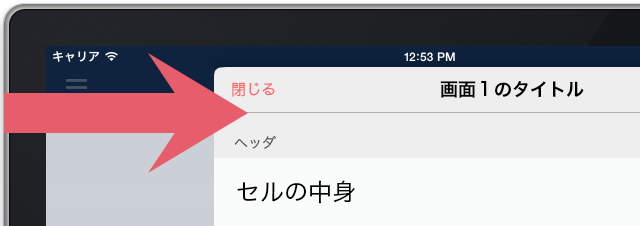
<style>
.page{position:relative;width:640px;height:226px;background:#eeeeee}
.page>*{position:absolute;margin:0}
.t1{font:15px "HiraKakuPro-W3";color:#f96969}
.t2{font:18px "HiraKakuPro-W6";color:#000000}
.t3{font:14px "HiraKakuPro-W3";color:#565656}
.t4{font:24px "HiraKakuPro-W3";color:#000000}
</style>
<div class="page">
<p class="t1" style="left:232px;top:82px;width:43px;height:15px">閉じる</p>
<p class="t2" style="left:440px;top:80px;width:144px;height:18px">画面１のタイトル</p>
<p class="t3" style="left:234px;top:135px;width:42px;height:14px">ヘッダ</p>
<p class="t4" style="left:237px;top:180px;width:118px;height:24px">セルの中身</p>
</div>
